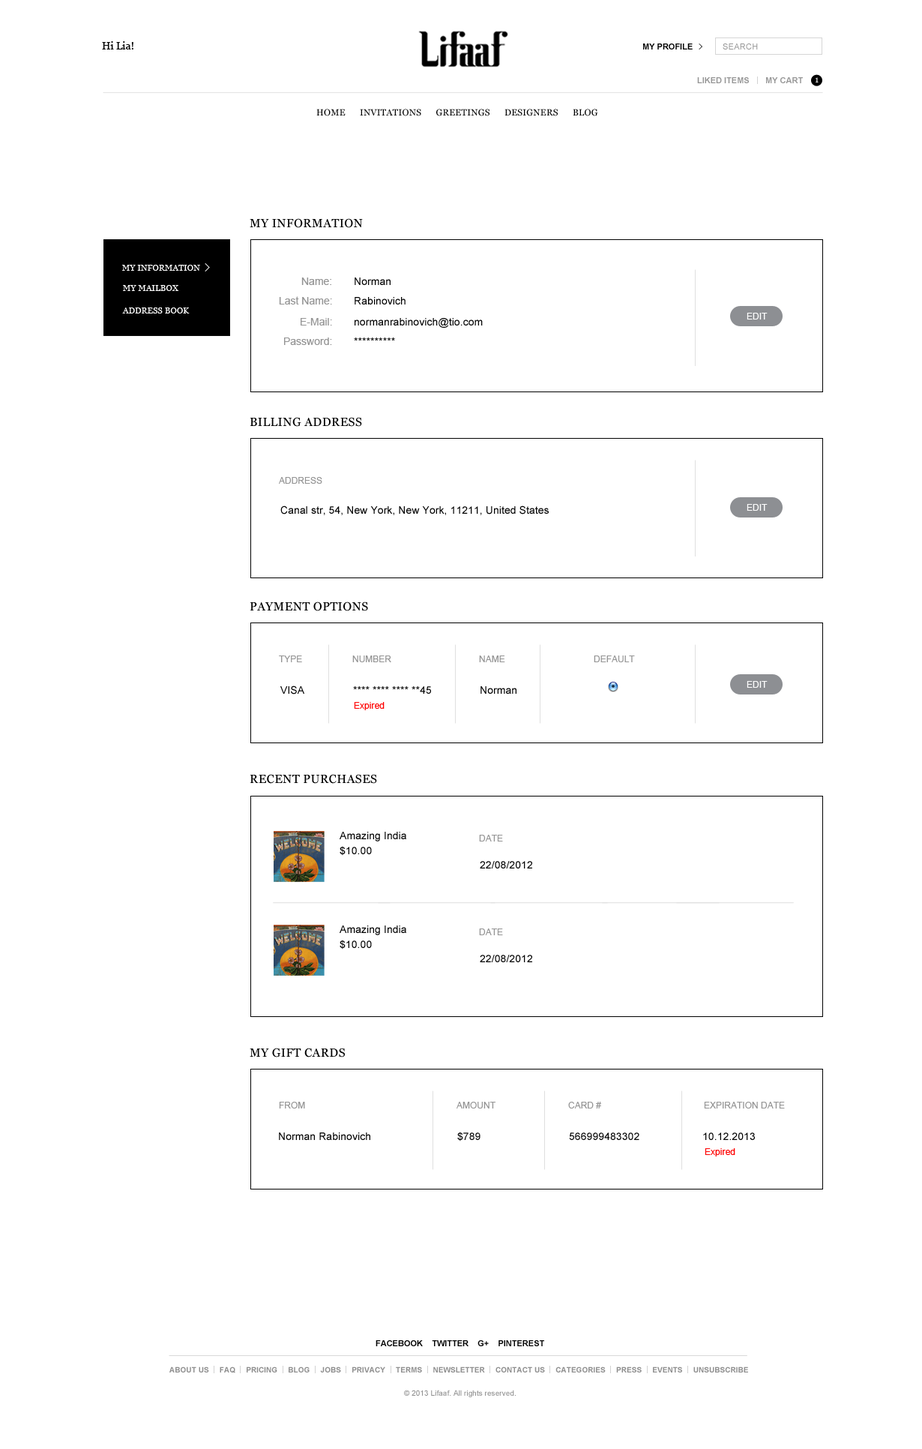
<style>
.page{position:relative;width:922px;height:1449px;background:#ffffff}
.page>*{position:absolute;margin:0}
.t1{font:10.5px "Georgia";color:#010101}
.t2{font:8.2px "Arial-BoldMT";color:#010101}
.t3{font:8.2px "ArialMT";letter-spacing:0.025em;color:#959595;text-transform:uppercase}
.t4{font:8.2px "Arial-BoldMT";color:#959595}
.t5{font:9px "Georgia";letter-spacing:0.025em;color:#ffffff}
.t6{font:9px "Georgia";letter-spacing:0.025em;color:#000000;text-transform:uppercase}
.t7{font:12px "Georgia";letter-spacing:0.025em;color:#000000;text-transform:uppercase}
.t8{font:8.2px "Georgia";letter-spacing:0.025em;color:#ffffff;text-transform:uppercase}
.t9{font:10.5px "ArialMT";color:#959595}
.t10{font:10.5px "ArialMT";letter-spacing:0.005em;color:#000000}
.t11{font:9px "ArialMT";color:#ffffff;text-transform:uppercase}
.t12{font:9px "ArialMT";color:#959595}
.t13{font:9px "ArialMT";letter-spacing:0.005em;color:#fe0000}
.t14{font:10.5px/15px "ArialMT";letter-spacing:0.005em;color:#000000}
.t15{font:9px "ArialMT";color:#959595;text-transform:uppercase}
.t16{font:8.2px "Arial-BoldMT";color:#010101;text-transform:uppercase}
.t17{font:7.5px "Arial-BoldMT";letter-spacing:0.005em;color:#8f8f8f;text-transform:uppercase}
.t18{font:7.5px "ArialMT";letter-spacing:0.005em;color:#8f8f8f}
</style>
<div class="page">
<p class="t1" style="left:102px;top:41px;width:32px;height:9px">Hi Lia!</p>
<p class="t2" style="left:644px;top:44px;width:49px;height:6px">MY PROFILE</p>
<p class="t3" style="left:723px;top:44px;width:35px;height:6px">search</p>
<p class="t4" style="left:698px;top:77px;width:105px;height:6px">LIKED ITEMS       MY CART</p>
<p class="t5" style="left:815px;top:77px;width:4px;height:5px">1</p>
<p class="t6" style="left:316px;top:109px;width:282px;height:7px">home      invitations      greetings      designers      blog</p>
<p class="t7" style="left:250px;top:218px;width:113px;height:10px">my information</p>
<p class="t8" style="left:122px;top:265px;width:78px;height:6px">my information</p>
<p class="t9" style="left:302px;top:278px;width:30px;height:7px">Name:</p>
<p class="t10" style="left:355px;top:278px;width:36px;height:7px">Norman</p>
<p class="t8" style="left:123px;top:285px;width:55px;height:6px">My mailbox</p>
<p class="t9" style="left:279px;top:296px;width:53px;height:8px">Last Name:</p>
<p class="t10" style="left:355px;top:297px;width:51px;height:7px">Rabinovich</p>
<p class="t8" style="left:122px;top:308px;width:68px;height:6px">Address book</p>
<p class="t9" style="left:301px;top:318px;width:31px;height:8px">E-Mail:</p>
<p class="t10" style="left:355px;top:318px;width:128px;height:10px">normanrabinovich@tio.com</p>
<p class="t11" style="left:747px;top:313px;width:21px;height:7px">edit</p>
<p class="t9" style="left:284px;top:338px;width:48px;height:7px">Password:</p>
<p class="t10" style="left:354px;top:338px;width:41px;height:3px">**********</p>
<p class="t7" style="left:250px;top:417px;width:112px;height:10px">Billing address</p>
<p class="t12" style="left:279px;top:477px;width:43px;height:7px">ADDRESS</p>
<p class="t10" style="left:280px;top:506px;width:269px;height:9px">Canal str, 54, New York, New York, 11211, United States</p>
<p class="t11" style="left:747px;top:504px;width:21px;height:7px">edit</p>
<p class="t7" style="left:250px;top:602px;width:118px;height:9px">payment OPTIONS</p>
<p class="t12" style="left:279px;top:656px;width:23px;height:6px">TYPE</p>
<p class="t12" style="left:352px;top:656px;width:40px;height:6px">NUMBER</p>
<p class="t12" style="left:479px;top:656px;width:27px;height:6px">NAME</p>
<p class="t12" style="left:594px;top:656px;width:41px;height:6px">DEFAULT</p>
<p class="t10" style="left:280px;top:686px;width:24px;height:8px">VISA</p>
<p class="t10" style="left:353px;top:686px;width:78px;height:8px">**** **** **** **45</p>
<p class="t10" style="left:481px;top:686px;width:36px;height:8px">Norman</p>
<p class="t11" style="left:747px;top:681px;width:21px;height:7px">edit</p>
<p class="t13" style="left:354px;top:702px;width:31px;height:8px">Expired</p>
<p class="t7" style="left:250px;top:774px;width:127px;height:10px">RECENT PURCHASES</p>
<p class="t14" style="left:340px;top:832px;width:66px;height:24px">Amazing India<br>$10.00</p>
<p class="t12" style="left:479px;top:835px;width:24px;height:7px">DATE</p>
<p class="t10" style="left:480px;top:861px;width:52px;height:7px">22/08/2012</p>
<p class="t14" style="left:340px;top:926px;width:66px;height:24px">Amazing India<br>$10.00</p>
<p class="t12" style="left:479px;top:928px;width:24px;height:7px">DATE</p>
<p class="t10" style="left:480px;top:955px;width:52px;height:7px">22/08/2012</p>
<p class="t7" style="left:250px;top:1048px;width:95px;height:10px">My gift cards</p>
<p class="t15" style="left:279px;top:1102px;width:26px;height:6px">From</p>
<p class="t15" style="left:457px;top:1102px;width:39px;height:6px">Amount</p>
<p class="t15" style="left:568px;top:1102px;width:34px;height:6px">card #</p>
<p class="t15" style="left:704px;top:1102px;width:81px;height:6px">Expiration date</p>
<p class="t10" style="left:279px;top:1132px;width:91px;height:8px">Norman Rabinovich</p>
<p class="t10" style="left:458px;top:1132px;width:23px;height:10px">$789</p>
<p class="t10" style="left:569px;top:1132px;width:71px;height:8px">566999483302</p>
<p class="t10" style="left:704px;top:1132px;width:51px;height:8px">10.12.2013</p>
<p class="t13" style="left:705px;top:1148px;width:31px;height:8px">Expired</p>
<p class="t16" style="left:376px;top:1340px;width:168px;height:6px">FACEBOOK    TWITTER    G+    PINTEREST</p>
<p class="t17" style="left:170px;top:1366px;width:578px;height:7px">About Us     FAQ     Pricing     blog     Jobs     Privacy     Terms     Newsletter     contact us     categories     press     Events     unsubscribe</p>
<p class="t18" style="left:404px;top:1390px;width:112px;height:7px">© 2013 Lifaaf. All rights reserved.</p>
</div>
